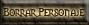
<style>
.page{position:relative;width:89px;height:25px}
.page>*{position:absolute;margin:0}
.t1{font:11px "Morpheus";color:#372002}
</style>
<div class="page">
<p class="t1" style="left:3px;top:7px;width:82px;height:11px">Borrar Personaje</p>
</div>
